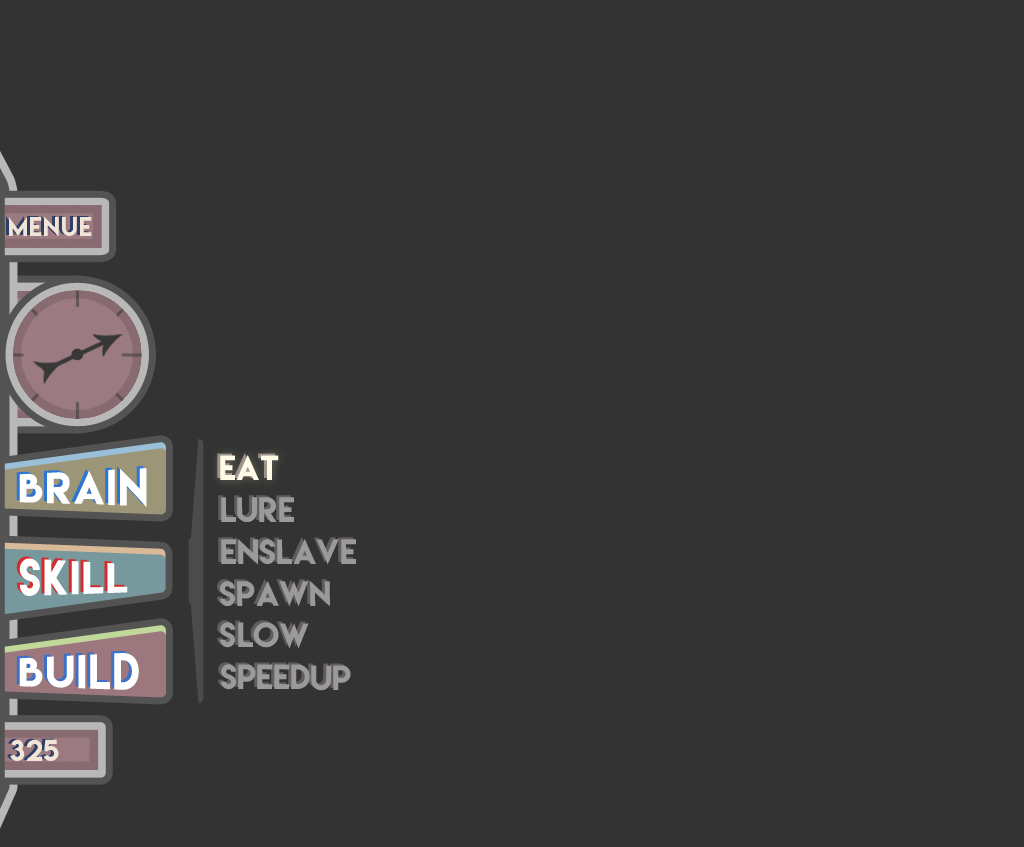
<style>
.page{position:relative;width:1024px;height:847px;background:#333333}
.page>*{position:absolute;margin:0}
.t1{font:23.6px "LemonMilk";letter-spacing:0.05em;color:#f2e5d6}
.t2{font:31.3px "LemonMilk";color:#ffffff}
.t3{font:41.3px "LemonMilk";letter-spacing:0.05em;color:#ffffff}
.t4{font:31.3px "LemonMilk";color:#9a9a9a}
.t5{font:27.2px "LemonMilk";color:#f2e5d6}
</style>
<div class="page">
<p class="t1" style="left:9px;top:216px;width:83px;height:21px">Menue</p>
<p class="t2" style="left:220px;top:455px;width:59px;height:25px">Eat</p>
<p class="t3" style="left:19px;top:468px;width:128px;height:39px">Brain</p>
<p class="t4" style="left:221px;top:497px;width:73px;height:25px">Lure</p>
<p class="t4" style="left:221px;top:539px;width:135px;height:26px">Enslave</p>
<p class="t3" style="left:19px;top:558px;width:109px;height:38px">Skill</p>
<p class="t4" style="left:220px;top:580px;width:110px;height:27px">Spawn</p>
<p class="t4" style="left:220px;top:622px;width:89px;height:27px">Slow</p>
<p class="t3" style="left:19px;top:653px;width:120px;height:37px">Build</p>
<p class="t4" style="left:221px;top:664px;width:130px;height:27px">Speedup</p>
<p class="t5" style="left:10px;top:739px;width:49px;height:22px">325</p>
</div>
